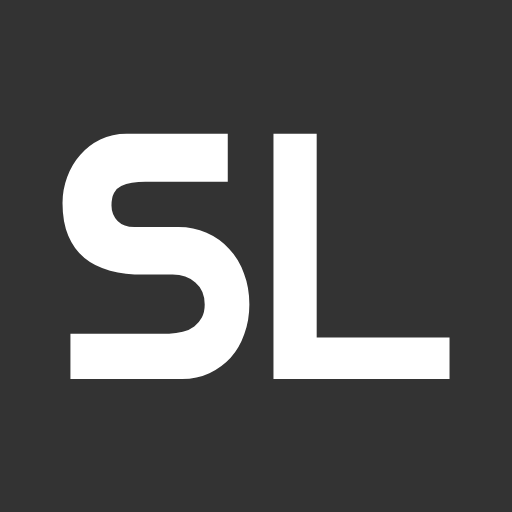
<style>
.page{position:relative;width:512px;height:512px;background:#333333}
.page>*{position:absolute;margin:0}
.t1{font:360px "DoHyeon-Regular";color:#ffffff}
</style>
<div class="page">
<p class="t1" style="left:62px;top:133px;width:388px;height:246px">SL</p>
</div>
